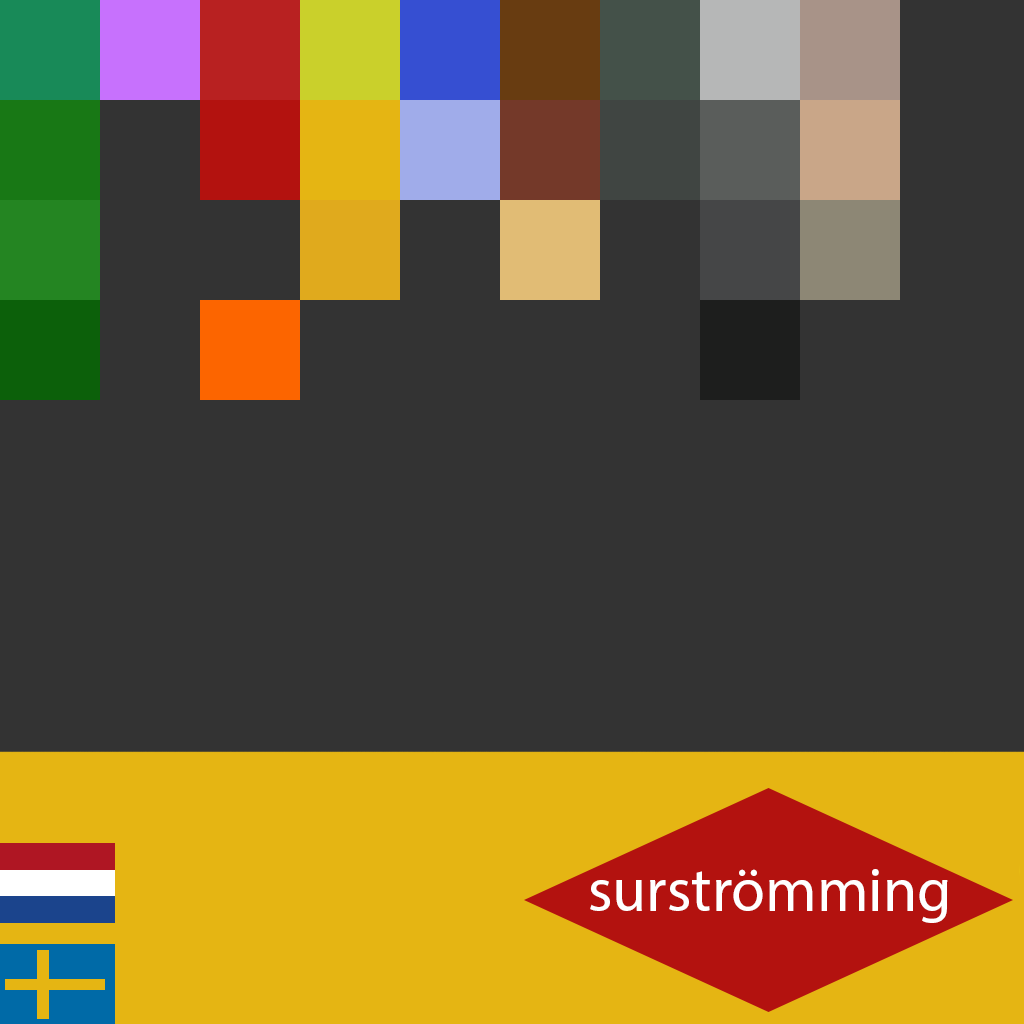
<style>
.page{position:relative;width:1024px;height:1024px;background:#333333}
.page>*{position:absolute;margin:0}
.t1{font:61.9px "MyriadPro-Regular";color:#ffffff}
</style>
<div class="page">
<p class="t1" style="left:590px;top:869px;width:358px;height:54px">surströmming</p>
</div>
